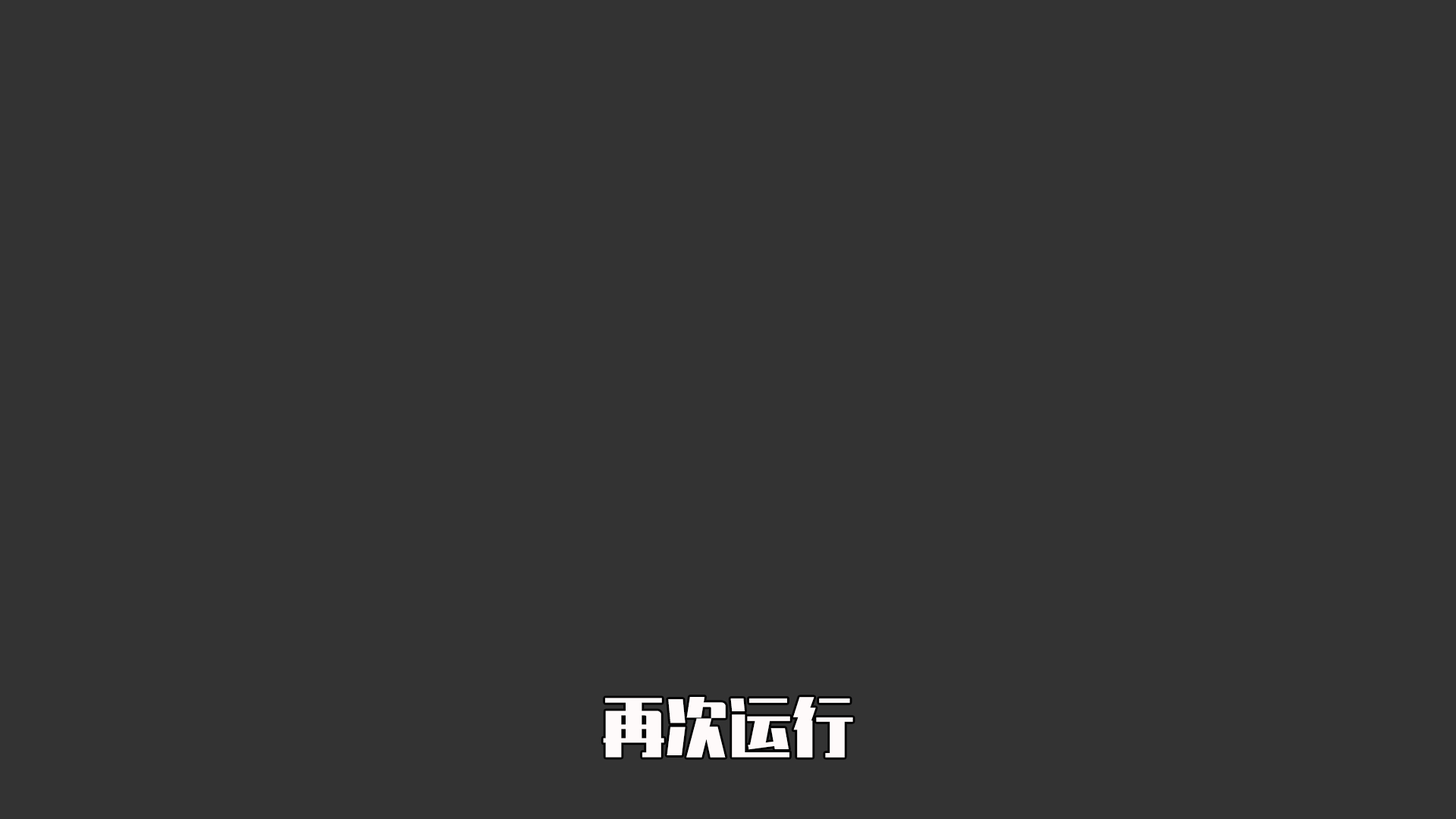
<style>
.page{position:relative;width:1456px;height:819px;background:#333333}
.page>*{position:absolute;margin:0}
.t1{font:63.2px "ZhenyanGB-Regular";color:#fefafa}
</style>
<div class="page">
<p class="t1" style="left:603px;top:697px;width:250px;height:61px">再次运行</p>
</div>
